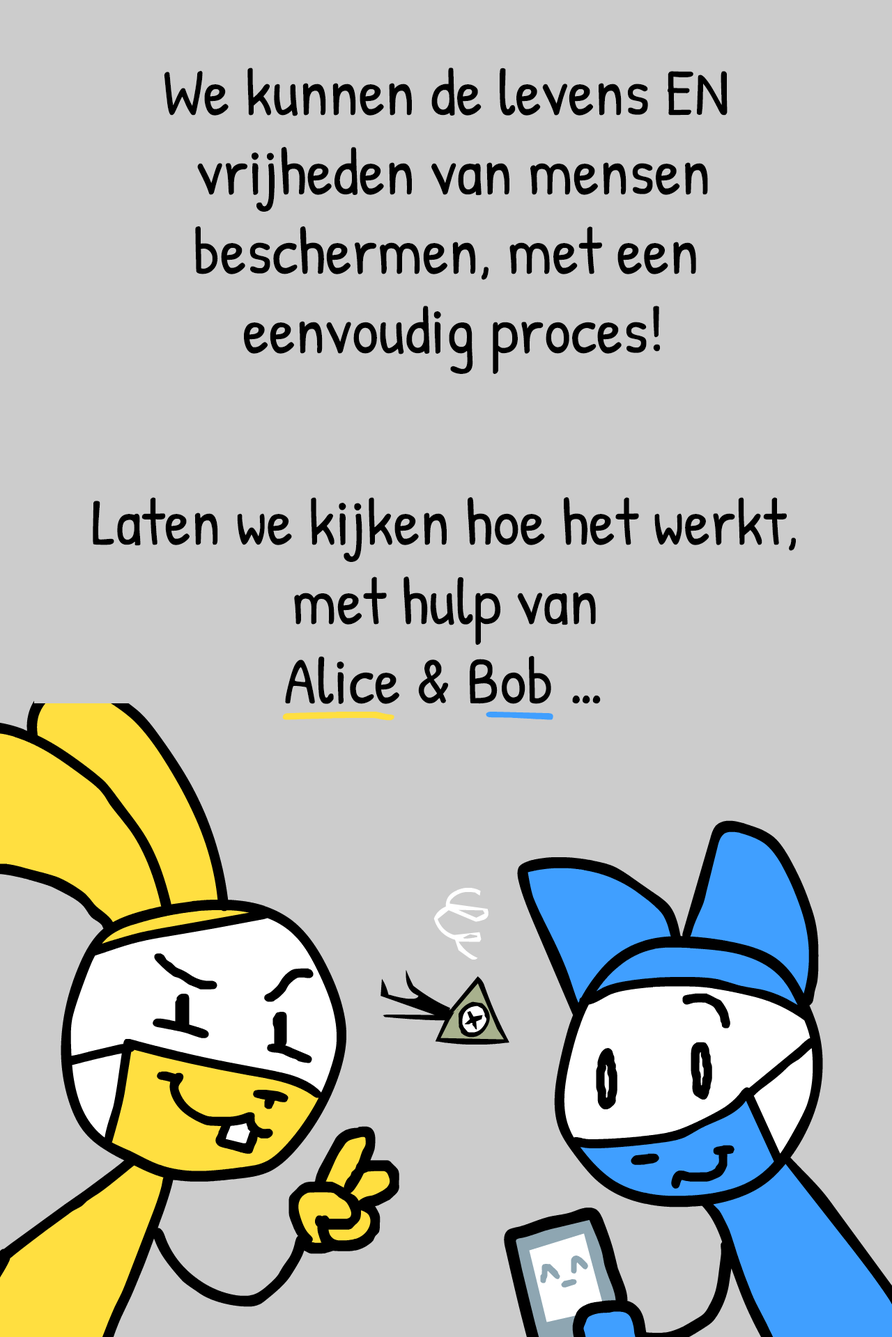
<style>
.page{position:relative;width:892px;height:1337px;background:#cccccc}
.page>*{position:absolute;margin:0}
.t1{font:66.2px "PatrickHand-Regular";color:#000000}
</style>
<div class="page">
<p class="t1" style="left:164px;top:68px;width:563px;height:306px;text-align:center">We kunnen de levens EN <br>vrijheden van mensen<br>beschermen, met een <br>eenvoudig proces!</p>
<p class="t1" style="left:93px;top:497px;width:702px;height:207px;text-align:center">Laten we kijken hoe het werkt,<br>met hulp van<br>Alice &amp; Bob …</p>
</div>
